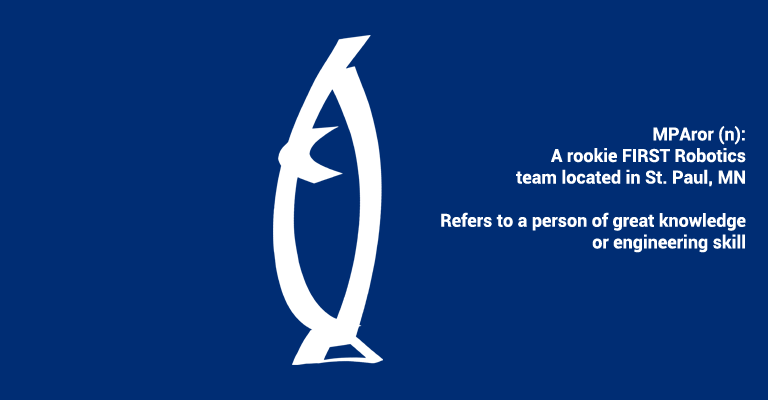
<style>
.page{position:relative;width:768px;height:400px;background:#002d74}
.page>*{position:absolute;margin:0}
.t1{font:18px "Roboto-Bold";color:#ffffff}
</style>
<div class="page">
<p class="t1" style="left:441px;top:126px;width:305px;height:127px;text-align:right">MPAror (n):<br>A rookie FIRST Robotics<br>team located in St. Paul, MN<br><br>Refers to a person of great knowledge<br>or engineering skill</p>
</div>
